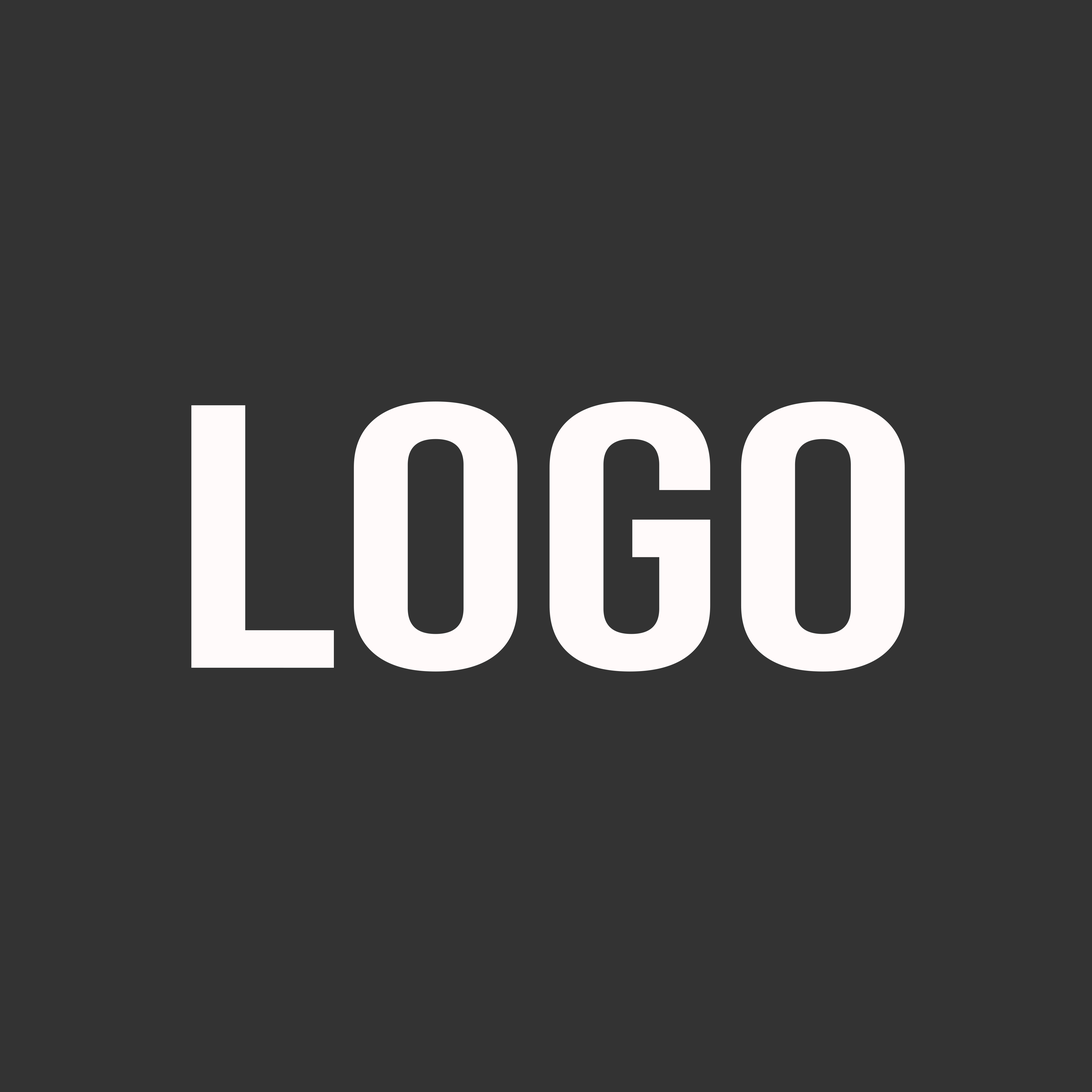
<style>
.page{position:relative;width:1092px;height:1092px;background:#333333}
.page>*{position:absolute;margin:0}
.t1{font:374.9px "BebasNeue-Regular";color:#fffafa;scale:1.31 1}
</style>
<div class="page">
<p class="t1" style="left:191px;top:401px;width:714px;height:271px">logo</p>
</div>
